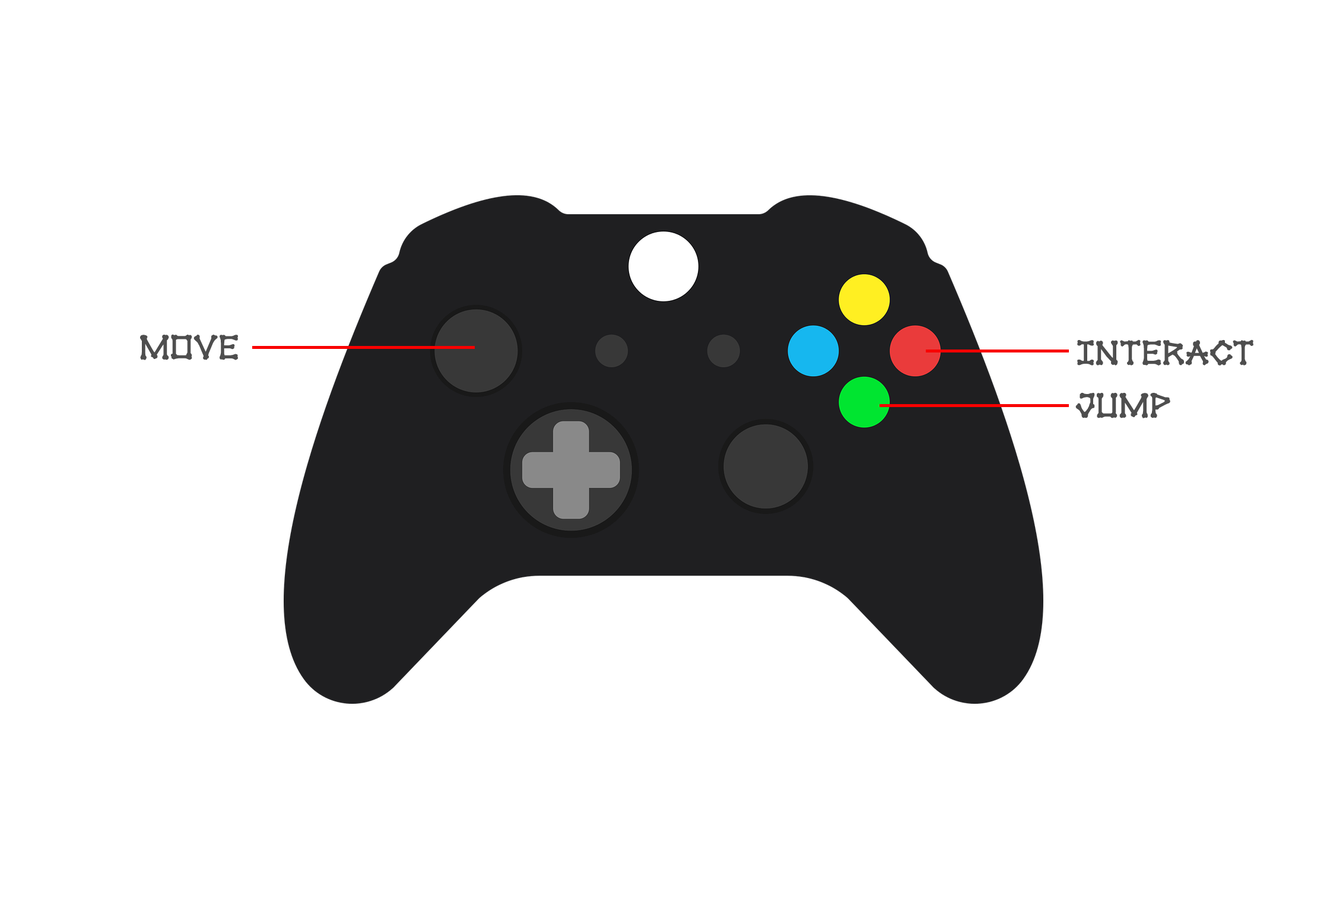
<style>
.page{position:relative;width:1327px;height:899px;background:#ffffff}
.page>*{position:absolute;margin:0}
.t1{font:35.6px "xBONESBold";letter-spacing:-0.01em;color:#4e4e4e}
</style>
<div class="page">
<p class="t1" style="left:140px;top:334px;width:98px;height:26px">Move</p>
<p class="t1" style="left:1077px;top:339px;width:176px;height:26px">Interact</p>
<p class="t1" style="left:1075px;top:393px;width:95px;height:25px">Jump</p>
</div>
